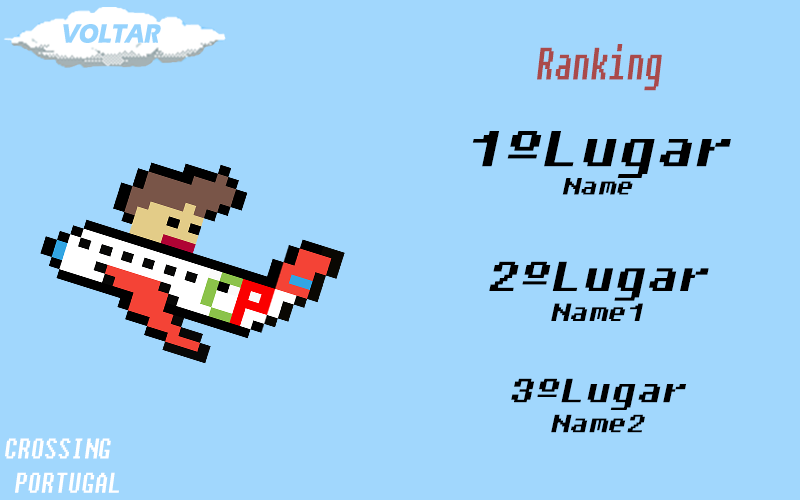
<style>
.page{position:relative;width:800px;height:500px;background:#a1d7fd}
.page>*{position:absolute;margin:0}
.t1{font:27.1px "ErasITC-Bold";color:#96d3fd;font-style:italic;scale:0.83 1}
.t2{font:45.3px "Fixedsys";color:#aa4a4a;font-style:italic;scale:0.64 1}
.t3{font:50px "Fixedsys";color:#000000;font-style:italic;scale:1.22 1}
.t4{font:23.6px "Fixedsys";color:#000000;font-style:italic;scale:1.22 1}
.t5{font:41.7px "Fixedsys";color:#000000;font-style:italic;scale:1.22 1}
.t6{font:25px "Fixedsys";color:#000000;font-style:italic;scale:1.22 1}
.t7{font:33.3px "Fixedsys";color:#000000;font-style:italic;scale:1.22 1}
.t8{font:28.4px "Fixedsys";color:#ffffff;font-style:italic;scale:0.76 1}
</style>
<div class="page">
<p class="t1" style="left:63px;top:24px;width:98px;height:19px">VOLTAR</p>
<p class="t2" style="left:537px;top:44px;width:125px;height:47px">Ranking</p>
<p class="t3" style="left:472px;top:131px;width:259px;height:302px;text-align:center">1ºLugar<br><span class="t4">Name<br><br></span><span class="t5">2ºLugar<br></span><span class="t6">Name1<br><br></span><span class="t7">3ºLugar<br></span><span class="t6">Name2</span></p>
<p class="t8" style="left:5px;top:438px;width:114px;height:55px">CROSSING <br> PORTUGAL</p>
</div>
